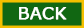
<style>
.page{position:relative;width:84px;height:28px;background:#116712}
.page>*{position:absolute;margin:0}
.t1{font:17px "Verdana";color:#ffffff;font-weight:bold}
</style>
<div class="page">
<p class="t1" style="left:19px;top:7px;width:48px;height:13px">BACK</p>
</div>
